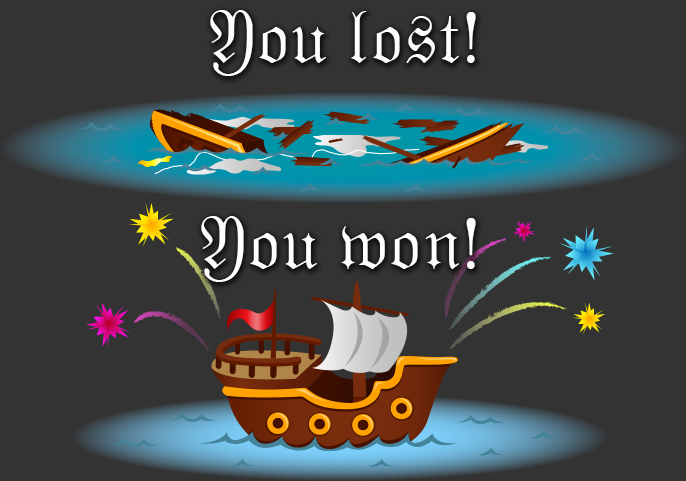
<style>
.page{position:relative;width:686px;height:481px;background:#333333}
.page>*{position:absolute;margin:0}
.t1{font:73.7px "ESSTIXFifteen";color:#fefefe}
.t2{font:73.7px "PlantagenetCherokee";color:#fefefe}
</style>
<div class="page">
<p class="t1" style="left:210px;top:10px;width:266px;height:66px">You lost<span class="t2">!</span></p>
<p class="t1" style="left:201px;top:216px;width:275px;height:66px">You won<span class="t2">!</span></p>
</div>
